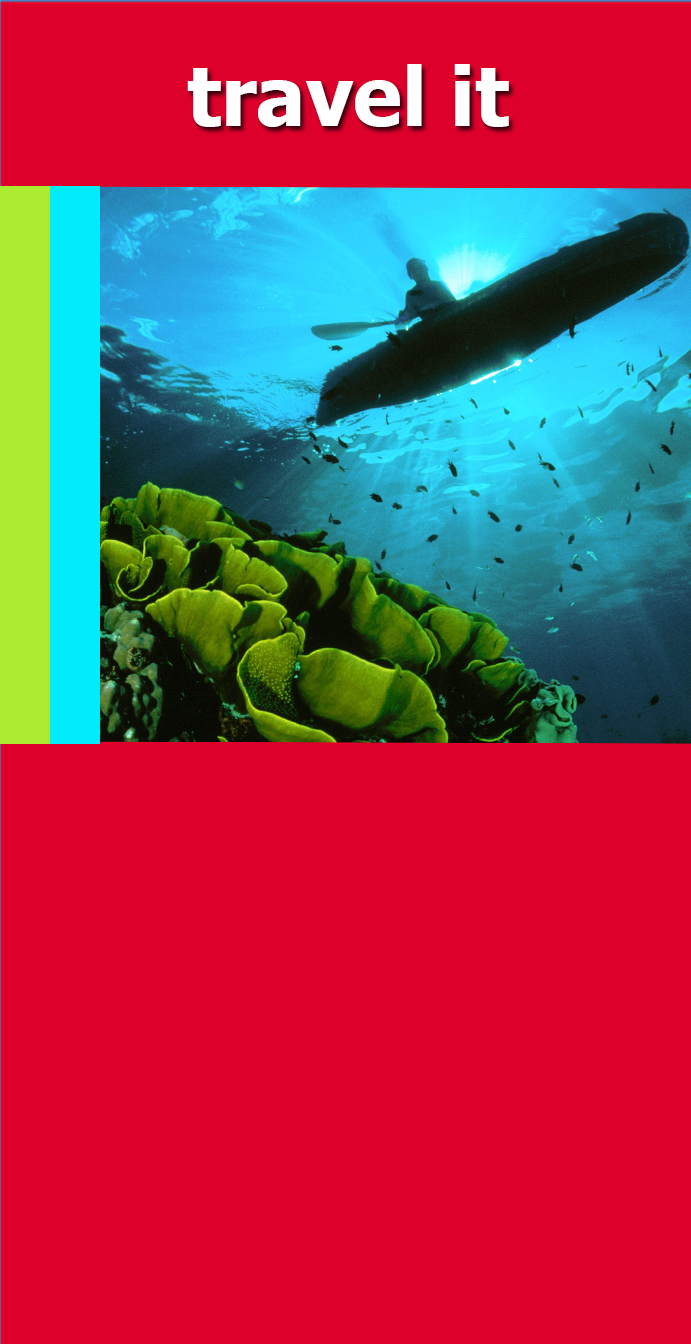
<style>
.page{position:relative;width:691px;height:1344px;background:#dd002b}
.page>*{position:absolute;margin:0}
.t1{font:82px "Tahoma-Bold";color:#ffffff}
</style>
<div class="page">
<p class="t1" style="left:187px;top:64px;width:322px;height:63px">travel it</p>
</div>
